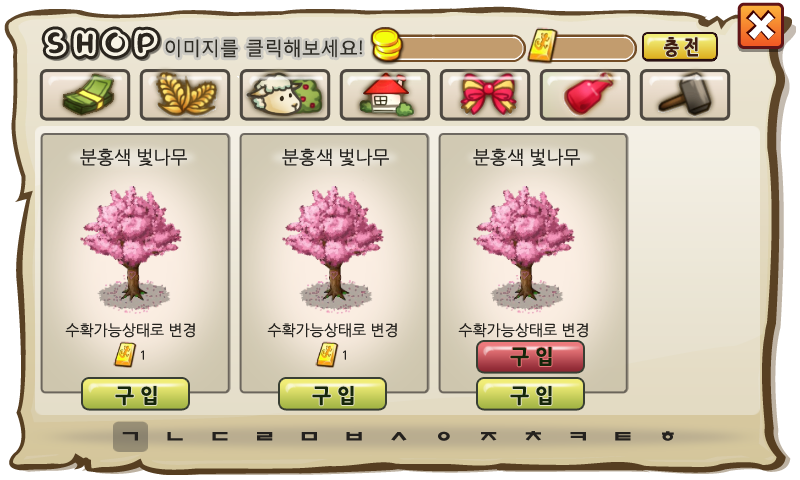
<style>
.page{position:relative;width:800px;height:480px}
.page>*{position:absolute;margin:0}
.t1{font:36.7px "FBDungPOPL";color:#f7f3e5}
.t2{font:18.8px "MalgunGothicRegular";color:#2f2d25}
.t3{font:20px "NanumGothicExtraBold";letter-spacing:0.3em;color:#401e11;scale:0.81 1}
.t4{font:18.2px "NanumGothic";color:#24221e}
.t5{font:15px "NanumGothic";color:#24221e}
.t6{font:12px "NanumGothic";color:#24221e}
.t7{font:20px "NanumGothicExtraBold";letter-spacing:0.3em;color:#16260a}
.t8{font:12px "NanumGothic"}
.t9{font:17.2px "HYtbrB";color:#24211e;scale:1.3 1}
</style>
<div class="page">
<p class="t1" style="left:44px;top:29px;width:114px;height:28px">SHOP</p>
<p class="t2" style="left:165px;top:39px;width:197px;height:19px">이미지를 클릭해보세요!</p>
<p class="t3" style="left:664px;top:37px;width:34px;height:20px">충전</p>
<p class="t4" style="left:80px;top:148px;width:107px;height:18px">분홍색 벛나무</p>
<p class="t4" style="left:282px;top:148px;width:107px;height:18px">분홍색 벛나무</p>
<p class="t4" style="left:473px;top:148px;width:107px;height:18px">분홍색 벛나무</p>
<p class="t5" style="left:65px;top:323px;width:130px;height:15px">수확가능상태로 변경</p>
<p class="t5" style="left:267px;top:323px;width:130px;height:15px">수확가능상태로 변경</p>
<p class="t5" style="left:458px;top:323px;width:130px;height:15px">수확가능상태로 변경</p>
<p class="t6" style="left:141px;top:350px;width:3px;height:10px">1</p>
<p class="t6" style="left:343px;top:350px;width:3px;height:10px">1</p>
<p class="t7" style="left:510px;top:347px;width:42px;height:20px">구입</p>
<p class="t8" style="left:534px;top:350px;width:3px;height:10px">1</p>
<p class="t7" style="left:115px;top:386px;width:42px;height:20px">구입</p>
<p class="t7" style="left:312px;top:386px;width:42px;height:20px">구입</p>
<p class="t7" style="left:510px;top:386px;width:42px;height:20px">구입</p>
<p class="t9" style="left:122px;top:431px;width:552px;height:10px">ㄱ   ㄴ   ㄷ   ㄹ   ㅁ   ㅂ   ㅅ   ㅇ   ㅈ   ㅊ   ㅋ   ㅌ   ㅎ</p>
</div>
